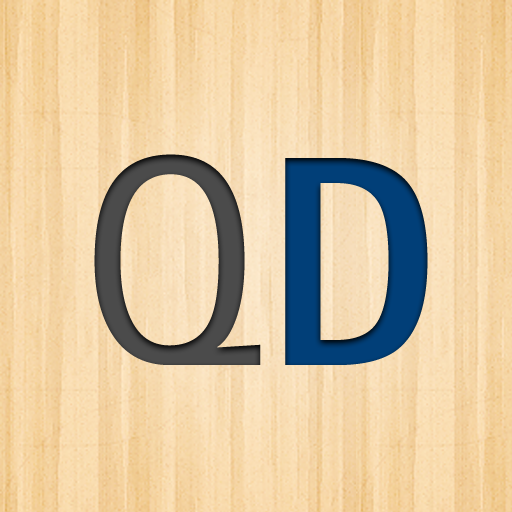
<style>
.page{position:relative;width:512px;height:512px}
.page>*{position:absolute;margin:0}
.t1{font:300px "AgfaRotisSansSerif";color:#4b4b4b}
.t2{font:300px "AgfaRotisSansSerifExBd";color:#013f78}
</style>
<div class="page">
<p class="t1" style="left:94px;top:154px;width:334px;height:211px">Q<span class="t2">D</span></p>
</div>
